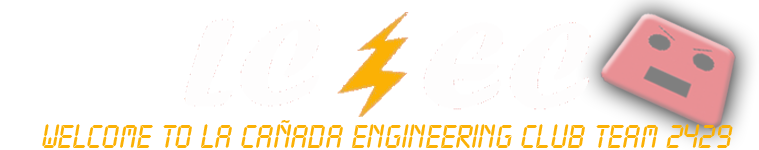
<style>
.page{position:relative;width:759px;height:150px;background:#ffffff}
.page>*{position:absolute;margin:0}
.t1{font:35.3px "LCDReg";color:#fbb105}
</style>
<div class="page">
<p class="t1" style="left:42px;top:120px;width:691px;height:28px">Welcome to La Cañada Engineering Club Team 2429</p>
</div>
